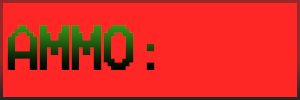
<style>
.page{position:relative;width:300px;height:100px;background:#ff2626}
.page>*{position:absolute;margin:0}
.t1{font:79.6px "8514oem";letter-spacing:-0.06em;text-transform:uppercase}
</style>
<div class="page">
<p class="t1" style="left:7px;top:25px;width:148px;height:45px">Ammo:</p>
</div>
